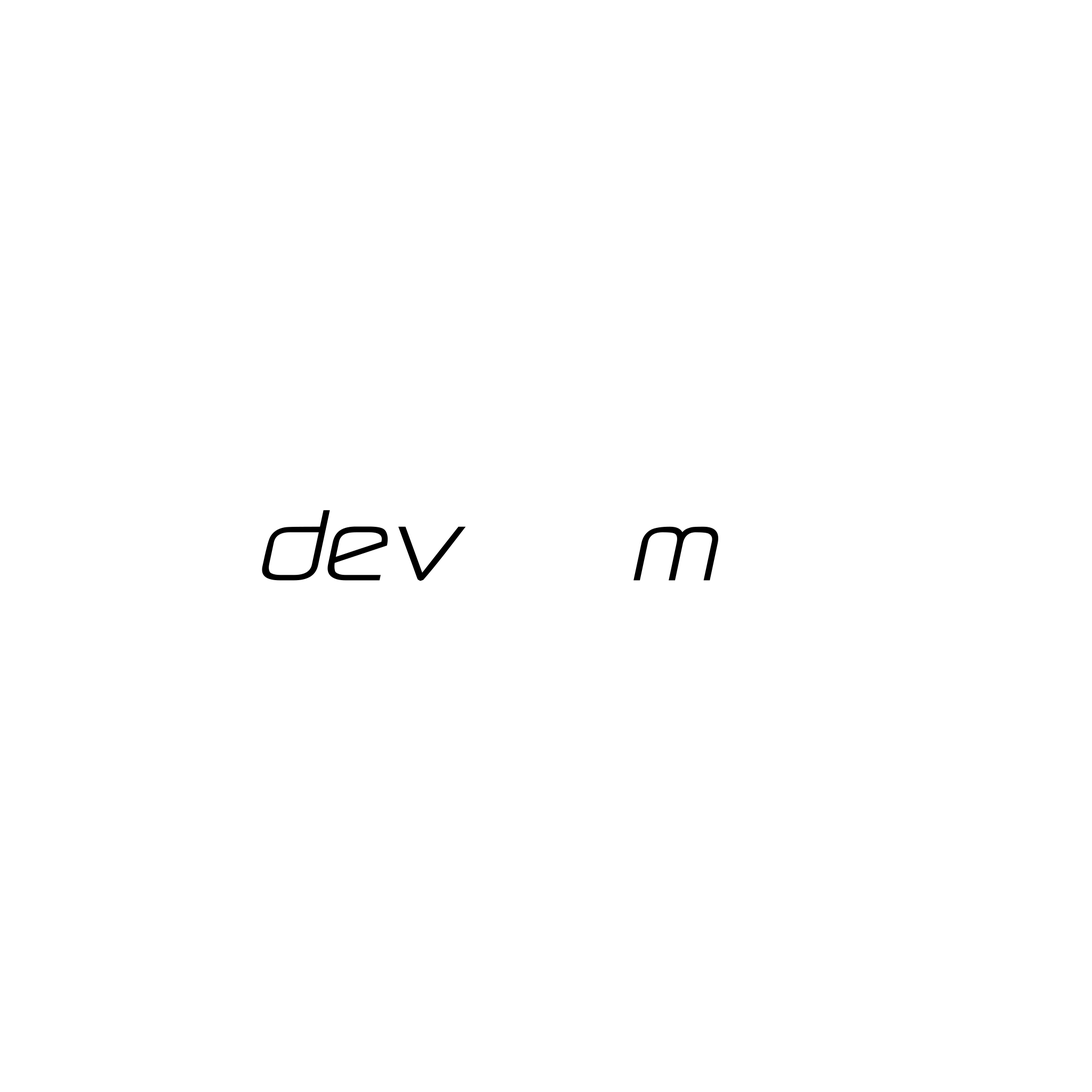
<style>
.page{position:relative;width:1092px;height:1092px;background:#ffffff}
.page>*{position:absolute;margin:0}
.t1{font:149.3px "NPIBita-Italic";color:#000000}
</style>
<div class="page">
<p class="t1" style="left:262px;top:510px;width:204px;height:71px">dev</p>
<p class="t1" style="left:633px;top:526px;width:85px;height:55px">m</p>
</div>
